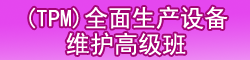
<style>
.page{position:relative;width:250px;height:60px}
.page>*{position:absolute;margin:0}
.t1{font:24px "SimHei";color:#ffffff}
</style>
<div class="page">
<p class="t1" style="left:29px;top:6px;width:199px;height:24px">(TPM)全面生产设备</p>
<p class="t1" style="left:66px;top:32px;width:120px;height:24px">维护高级班</p>
</div>
